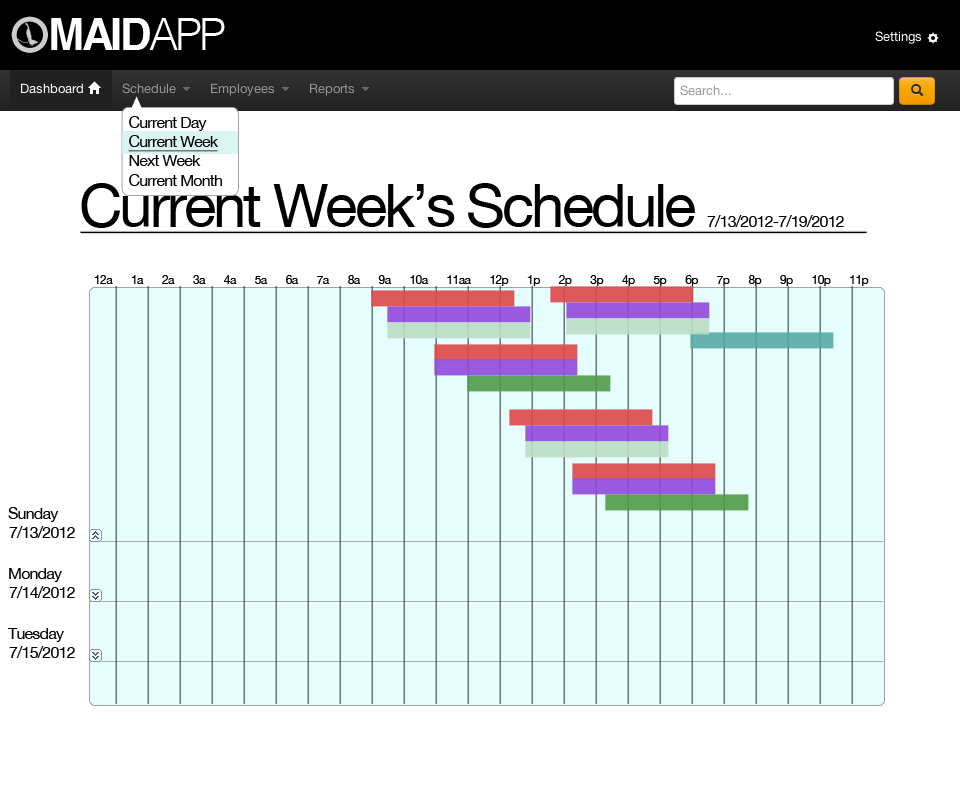
<style>
.page{position:relative;width:960px;height:790px;background:#ffffff}
.page>*{position:absolute;margin:0}
.t1{font:16px "HelveticaNeue";letter-spacing:-0.05em;color:#000000}
.t2{font:16px "HelveticaNeue";letter-spacing:-0.05em;color:#000000;text-decoration:underline}
.t3{font:60px "HelveticaNeue";letter-spacing:-0.05em;color:#000000}
.t4{font:12px "HelveticaNeue";letter-spacing:-0.05em;color:#000000}
.t5{font:12px "HelveticaNeue";letter-spacing:-0.05em;color:#ffffff}
.t6{font:12px/16px "HelveticaNeue";letter-spacing:-0.05em}
.t7{font:16px/30px "HelveticaNeue";letter-spacing:-0.05em;color:#000000}
.t8{font:16px/30px "HelveticaNeue";letter-spacing:-0.045em;color:#ababab}
.t9{font:16px/29px "HelveticaNeue";letter-spacing:-0.045em;color:#ababab}
</style>
<div class="page">
<p class="t1" style="left:128px;top:116px;width:94px;height:70px;text-align:justify">Current Day<br><span class="t2">Current Week<br></span>Next Week<br>Current Month</p>
<p class="t3" style="left:81px;top:183px;width:614px;height:45px">Current Week’s Schedule</p>
<p class="t1" style="left:707px;top:215px;width:137px;height:12px">7/13/2012-7/19/2012</p>
<p class="t4" style="left:94px;top:275px;width:800px;height:11px">12a 1a 2a 3a 4a 5a 6a 7a 8a 9a 10a 11aa 12p 1p 2p 3p 4p 5p 6p 7p 8p 9p 10p 11p <span class="t5">_</span></p>
<p class="t6" style="left:115px;top:286px;width:738px;height:418px;text-align:justify;rotate:180deg">|||||||||||||||||||||||||||||||||||<br><br>|||||||||||||||||||||||||||||||||||<br><br>|||||||||||||||||||||||||||||||||||<br><br>|||||||||||||||||||||||||||||||||||<br><br>|||||||||||||||||||||||||||||||||||<br><br>|||||||||||||||||||||||||||||||||||<br><br>|||||||||||||||||||||||||||||||||||<br><br>|||||||||||||||||||||||||||||||||||<br><br>|||||||||||||||||||||||||||||||||||<br><br>|||||||||||||||||||||||||||||||||||<br><br>|||||||||||||||||||||||||||||||||||<br><br>|||||||||||||||||||||||||||||||||||<br><br>|||||||||||||||||||||||||||||||||||<br><br>|||||||||||||||||||||||||||||||||||<br><br>|||||||||||||||||||||||||||||||||||<br><br>|||||||||||||||||||||||||||||||||||<br><br>|||||||||||||||||||||||||||||||||||<br><br>|||||||||||||||||||||||||||||||||||<br><br>|||||||||||||||||||||||||||||||||||<br><br>|||||||||||||||||||||||||||||||||||<br><br>|||||||||||||||||||||||||||||||||||<br><br>|||||||||||||||||||||||||||||||||||<br><br>|||||||||||||||||||||||||||||||||||<br><br>|||||||||||||||||||||||||||||||||||<br><br><br><br>|||||||||||||||||||||||||||||||||||<br><br>|||||||||||||||||||||||||||||||||||</p>
<p class="t7" style="left:7px;top:507px;width:57px;height:135px;text-align:justify">Sunday<br><br>Monday<br><br>Tuesday<br><br>Wednesday<br><br>Thursday</p>
<p class="t7" style="left:9px;top:526px;width:66px;height:132px;text-align:justify">7/13/2012<br><br>7/14/2012<br><br>7/15/2012<br><br>7/16/2012<br><br>7/17/2012</p>
<p class="t8" style="left:88px;top:541px;width:796px;height:121px;text-align:justify"><span class="t9"><br><br><br><br><br><br><br><br></span>_____________________________________________________________________________________________________________<br><br>_____________________________________________________________________________________________________________<br><br>_____________________________________________________________________________________________________________<br><br>_____________________________________________________________________________________________________________</p>
</div>
